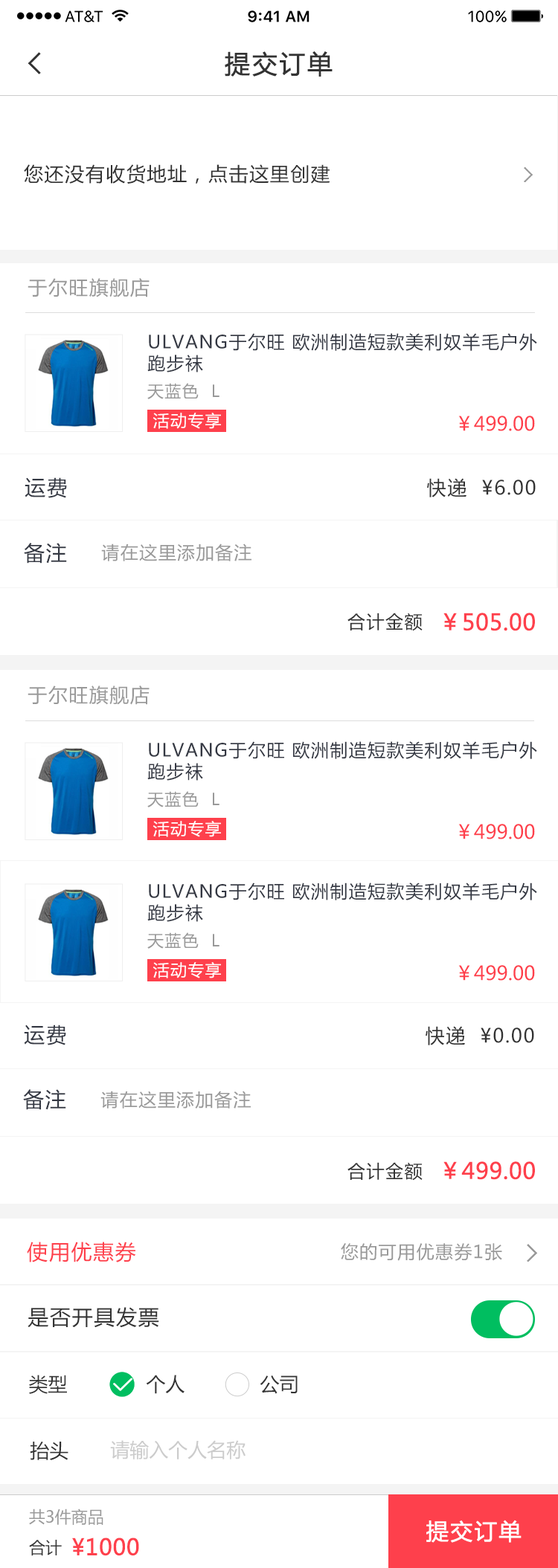
<style>
.page{position:relative;width:558px;height:1568px;background:#ffffff}
.page>*{position:absolute;margin:0}
.t1{font:25.3px "MicrosoftYaHei";letter-spacing:0.06em;color:#333333;font-weight:bold}
.t2{font:19.3px "MicrosoftYaHei";letter-spacing:0.06em;color:#333333}
.t3{font:19.3px "MicrosoftYaHei";letter-spacing:0.06em;color:#999999}
.t4{font:17.8px "MicrosoftYaHei";letter-spacing:0.06em;color:#343843}
.t5{font:16.3px "MicrosoftYaHei";letter-spacing:0.06em;color:#999999}
.t6{font:16.4px "MicrosoftYaHei";letter-spacing:0.06em;color:#ffffff}
.t7{font:19.3px "MicrosoftYaHei";color:#fe404c}
.t8{font:20.8px "MicrosoftYaHei";letter-spacing:0.06em;color:#343843}
.t9{font:17.8px "MicrosoftYaHei";letter-spacing:0.06em;color:#999999}
.t10{font:17.8px "MicrosoftYaHei";letter-spacing:0.06em;color:#333333}
.t11{font:22.3px "MicrosoftYaHei";color:#fe404c;font-weight:bold}
.t12{font:20.8px "MicrosoftYaHei";letter-spacing:0.06em;color:#fe404c}
.t13{font:20.8px "MicrosoftYaHei";letter-spacing:0.06em;color:#333333}
.t14{font:19.3px "MicrosoftYaHei";color:#333333}
.t15{font:19.3px "MicrosoftYaHei";color:#cccccc}
.t16{font:16.4px "MicrosoftYaHei";color:#999999}
.t17{font:22.3px "MicrosoftYaHei";letter-spacing:0.06em;color:#ffffff;font-weight:bold}
.t18{font:16.4px "MicrosoftYaHei";color:#333333}
</style>
<div class="page">
<p class="t1" style="left:225px;top:51px;width:107px;height:26px">提交订单</p>
<p class="t2" style="left:24px;top:164px;width:306px;height:20px">您还没有收货地址，点击这里创建</p>
<p class="t3" style="left:28px;top:278px;width:121px;height:19px">于尔旺旗舰店</p>
<p class="t4" style="left:147px;top:333px;width:390px;height:39px">ULVANG于尔旺 欧洲制造短款美利奴羊毛户外跑步袜</p>
<p class="t5" style="left:147px;top:383px;width:72px;height:16px">天蓝色  L</p>
<p class="t6" style="left:152px;top:413px;width:69px;height:16px">活动专享</p>
<p class="t7" style="left:458px;top:416px;width:77px;height:15px">￥499.00</p>
<p class="t8" style="left:25px;top:477px;width:42px;height:21px">运费</p>
<p class="t2" style="left:427px;top:478px;width:108px;height:19px">快递  ¥6.00</p>
<p class="t8" style="left:24px;top:543px;width:43px;height:21px">备注</p>
<p class="t9" style="left:101px;top:543px;width:150px;height:18px">请在这里添加备注</p>
<p class="t10" style="left:347px;top:613px;width:75px;height:18px">合计金额</p>
<p class="t11" style="left:443px;top:613px;width:92px;height:18px">￥505.00</p>
<p class="t3" style="left:28px;top:685px;width:121px;height:20px">于尔旺旗舰店</p>
<p class="t4" style="left:147px;top:741px;width:390px;height:40px">ULVANG于尔旺 欧洲制造短款美利奴羊毛户外跑步袜</p>
<p class="t5" style="left:147px;top:791px;width:72px;height:16px">天蓝色  L</p>
<p class="t6" style="left:152px;top:821px;width:69px;height:16px">活动专享</p>
<p class="t7" style="left:458px;top:824px;width:77px;height:15px">￥499.00</p>
<p class="t4" style="left:147px;top:883px;width:390px;height:39px">ULVANG于尔旺 欧洲制造短款美利奴羊毛户外跑步袜</p>
<p class="t5" style="left:147px;top:932px;width:72px;height:17px">天蓝色  L</p>
<p class="t6" style="left:152px;top:962px;width:69px;height:16px">活动专享</p>
<p class="t7" style="left:458px;top:965px;width:77px;height:16px">￥499.00</p>
<p class="t8" style="left:24px;top:1025px;width:42px;height:20px">运费</p>
<p class="t2" style="left:425px;top:1026px;width:109px;height:19px">快递  ¥0.00</p>
<p class="t8" style="left:23px;top:1089px;width:43px;height:21px">备注</p>
<p class="t9" style="left:100px;top:1091px;width:151px;height:18px">请在这里添加备注</p>
<p class="t10" style="left:347px;top:1162px;width:75px;height:19px">合计金额</p>
<p class="t11" style="left:443px;top:1161px;width:92px;height:19px">￥499.00</p>
<p class="t12" style="left:27px;top:1242px;width:109px;height:20px">使用优惠券</p>
<p class="t9" style="left:341px;top:1243px;width:161px;height:18px">您的可用优惠券1张</p>
<p class="t13" style="left:28px;top:1307px;width:131px;height:21px">是否开具发票</p>
<p class="t14" style="left:29px;top:1375px;width:38px;height:19px">类型</p>
<p class="t14" style="left:146px;top:1375px;width:38px;height:19px">个人</p>
<p class="t14" style="left:259px;top:1375px;width:38px;height:19px">公司</p>
<p class="t14" style="left:30px;top:1441px;width:38px;height:19px">抬头</p>
<p class="t15" style="left:110px;top:1440px;width:135px;height:19px">请输入个人名称</p>
<p class="t16" style="left:29px;top:1509px;width:74px;height:16px">共3件商品</p>
<p class="t17" style="left:426px;top:1520px;width:95px;height:23px">提交订单</p>
<p class="t18" style="left:29px;top:1540px;width:33px;height:16px">合计</p>
<p class="t11" style="left:72px;top:1538px;width:67px;height:18px">¥1000</p>
</div>
